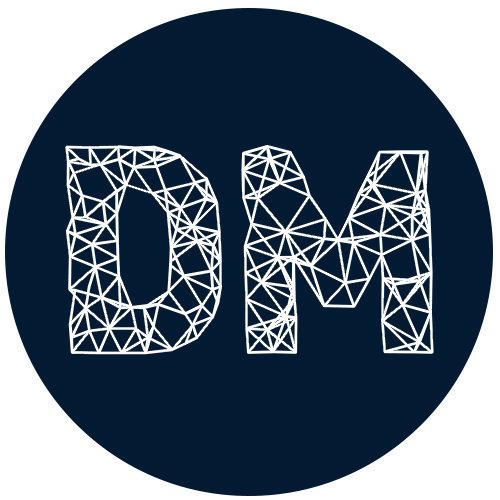
<style>
.page{position:relative;width:500px;height:500px;background:#031a33}
.page>*{position:absolute;margin:0}
.t1{font:206.6px "Adamas-Regular";color:#ffffff}
</style>
<div class="page">
<p class="t1" style="left:66px;top:145px;width:367px;height:209px">DM</p>
</div>
